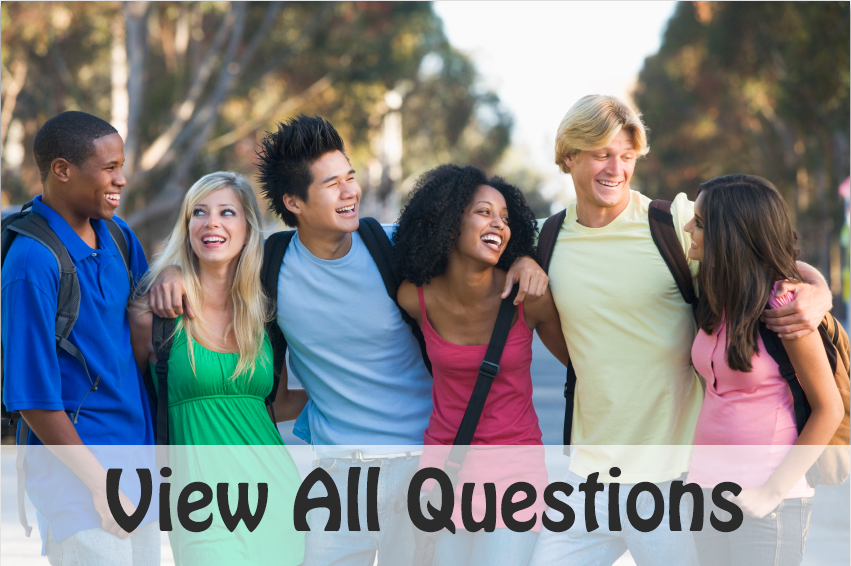
<style>
.page{position:relative;width:851px;height:566px}
.page>*{position:absolute;margin:0}
.t1{font:75px "HoboStd";color:#2c2b2b}
</style>
<div class="page">
<p class="t1" style="left:106px;top:466px;width:638px;height:69px">View All Questions</p>
</div>
